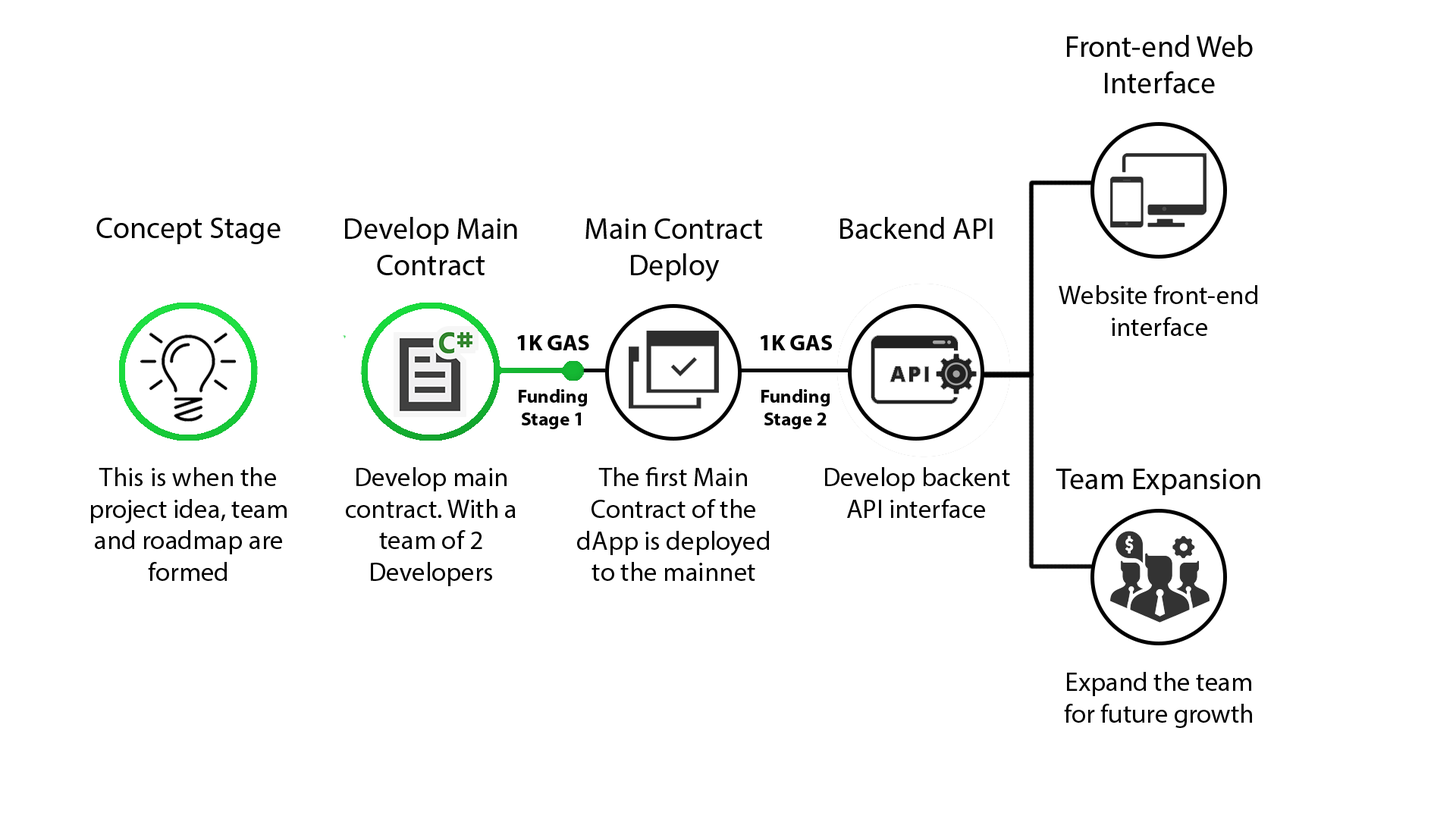
<style>
.page{position:relative;width:1456px;height:819px;background:#ffffff}
.page>*{position:absolute;margin:0}
.t1{font:30.3px "MyriadPro-Regular";color:#000000}
.t2{font:26.5px "MyriadPro-Regular";color:#000000}
.t3{font:22.5px "MyriadPro-Bold";color:#000000}
.t4{font:19px "MyriadPro-Bold";color:#000000}
</style>
<div class="page">
<p class="t1" style="left:1067px;top:35px;width:186px;height:58px;text-align:center">Front-end Web Interface</p>
<p class="t1" style="left:96px;top:218px;width:185px;height:26px">Concept Stage</p>
<p class="t1" style="left:345px;top:217px;width:172px;height:58px;text-align:center">Develop Main Contract</p>
<p class="t1" style="left:585px;top:218px;width:177px;height:64px;text-align:center">Main Contract Deploy</p>
<p class="t1" style="left:840px;top:217px;width:153px;height:22px">Backend API</p>
<p class="t2" style="left:1059px;top:285px;width:198px;height:51px;text-align:center">Website front-end interface</p>
<p class="t3" style="left:517px;top:335px;width:72px;height:15px">1K GAS</p>
<p class="t3" style="left:761px;top:335px;width:71px;height:15px">1K GAS</p>
<p class="t4" style="left:519px;top:389px;width:68px;height:40px;text-align:center">Funding Stage 1</p>
<p class="t4" style="left:761px;top:389px;width:69px;height:40px;text-align:center">Funding Stage 2</p>
<p class="t2" style="left:91px;top:467px;width:196px;height:114px;text-align:center">This is when the project idea, team and roadmap are formed</p>
<p class="t2" style="left:346px;top:467px;width:170px;height:119px;text-align:center">Develop main contract. With a team of 2 Developers</p>
<p class="t2" style="left:577px;top:467px;width:192px;height:114px;text-align:center">The first Main Contract of the dApp is deployed to the mainnet</p>
<p class="t2" style="left:825px;top:467px;width:185px;height:51px;text-align:center">Develop backent API interface</p>
<p class="t1" style="left:1056px;top:469px;width:204px;height:26px">Team Expansion</p>
<p class="t2" style="left:1064px;top:672px;width:188px;height:56px;text-align:center">Expand the team for future growth</p>
</div>
